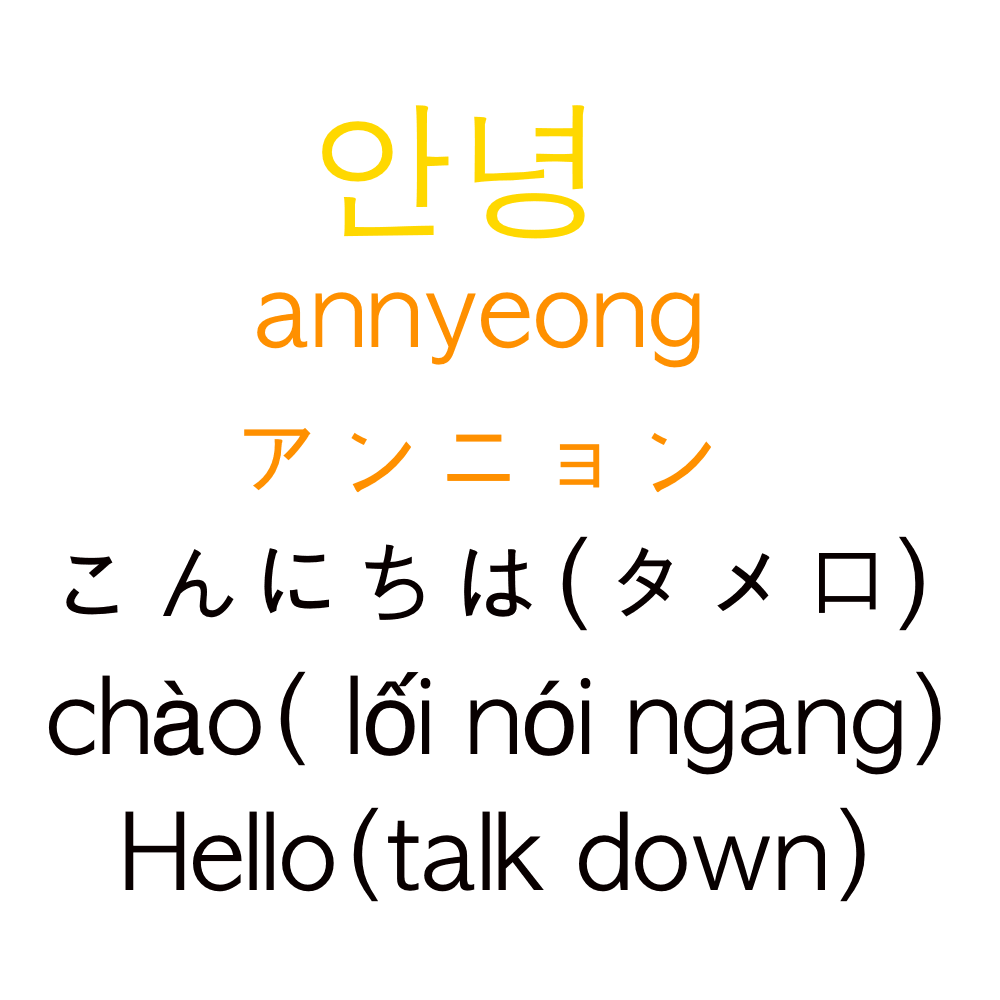
<style>
.page{position:relative;width:1000px;height:1000px;background:#ffffff}
.page>*{position:absolute;margin:0}
.t1{font:150px "AppleGothic";color:#ffd800}
.t2{font:100px "AppleGothic";color:#ff9000}
.t3{font:100px "AppleGothic";color:#080000}
.t4{font:100px "Helvetica";color:#080000}
</style>
<div class="page">
<p class="t1" style="left:322px;top:105px;width:263px;height:134px">안녕</p>
<p class="t2" style="left:257px;top:292px;width:443px;height:76px">annyeong</p>
<p class="t2" style="left:244px;top:428px;width:467px;height:65px"><span class="t1"><br></span>アンニョン</p>
<p class="t3" style="left:66px;top:536px;width:858px;height:95px">こんにちは(タメ口）</p>
<p class="t3" style="left:48px;top:671px;width:893px;height:104px">ch<span class="t4">à</span>o( l<span class="t4">ố</span>i n<span class="t4">ó</span>i ngang)</p>
<p class="t3" style="left:125px;top:807px;width:740px;height:95px">Hello(talk down)</p>
</div>
